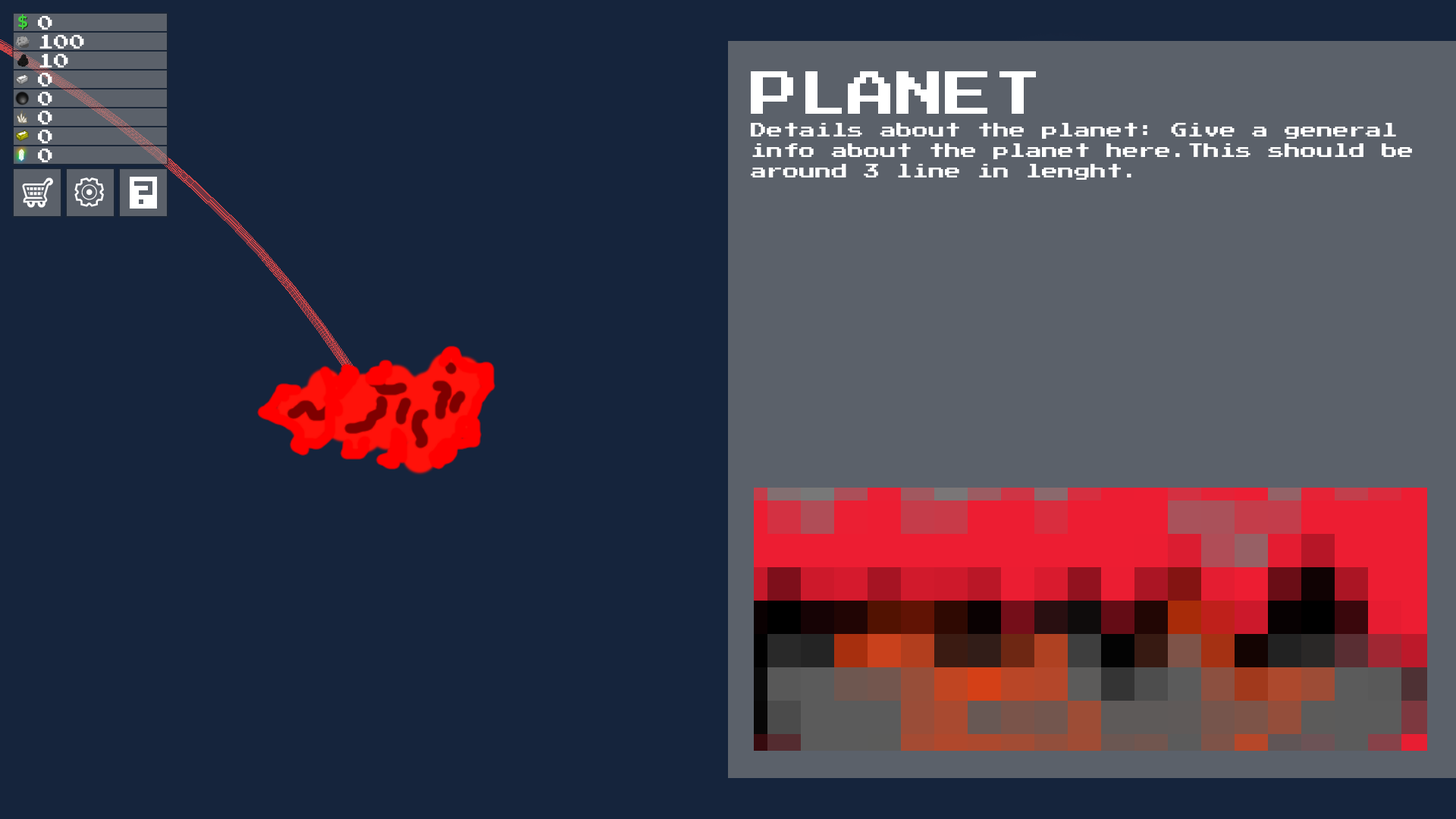
<style>
.page{position:relative;width:1456px;height:819px;background:#15243c}
.page>*{position:absolute;margin:0}
.t1{font:48.5px "PressStart2P-Regular";color:#ffffff}
.t2{font:16.2px/20.2px "PressStart2P-Regular";color:#ffffff}
.t3{font:16.2px/18.2px "PressStart2P-Regular";color:#ffffff}
</style>
<div class="page">
<p class="t1" style="left:751px;top:71px;width:285px;height:43px">PLANET</p>
<p class="t2" style="left:751px;top:123px;width:661px;height:57px"><span class="t3">D</span>etails about the planet: Give a general <br>info about the planet here.This should be<br>around 3 line in lenght.</p>
</div>
